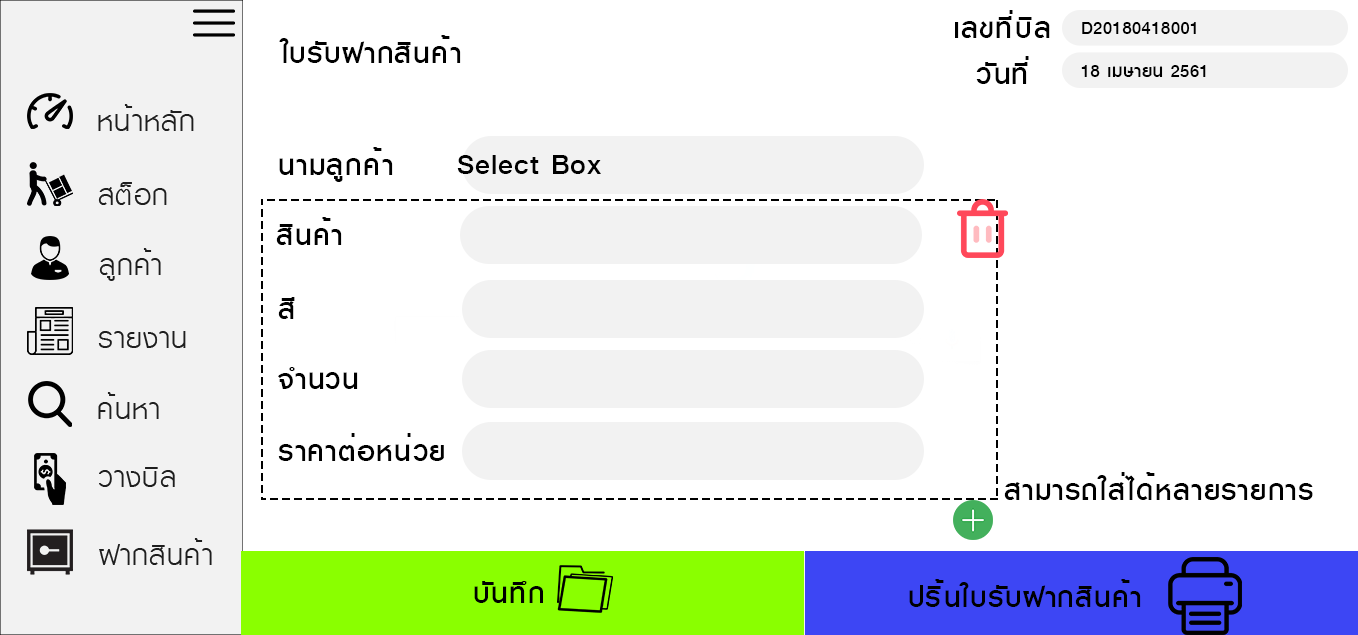
<style>
.page{position:relative;width:1358px;height:635px;background:#ffffff}
.page>*{position:absolute;margin:0}
.t1{font:40px "KittithadaMedium65P";letter-spacing:0.025em;color:#000000}
.t2{font:24.6px "KittithadaMedium65P";letter-spacing:0.025em;color:#000000}
</style>
<div class="page">
<p class="t1" style="left:955px;top:10px;width:95px;height:28px">เลขที่บิล</p>
<p class="t2" style="left:1082px;top:22px;width:114px;height:12px">D20180418001</p>
<p class="t1" style="left:279px;top:35px;width:182px;height:28px">ใบรับฝากสินค้า</p>
<p class="t1" style="left:976px;top:56px;width:53px;height:28px">วันที่</p>
<p class="t2" style="left:1081px;top:65px;width:125px;height:12px">18 เมษายน 2561</p>
<p class="t1" style="left:279px;top:147px;width:114px;height:35px">นามลูกค้า</p>
<p class="t1" style="left:457px;top:155px;width:144px;height:19px">Select Box</p>
<p class="t1" style="left:276px;top:217px;width:66px;height:28px">สินค้า</p>
<p class="t1" style="left:278px;top:297px;width:17px;height:22px">สี</p>
<p class="t1" style="left:278px;top:367px;width:80px;height:22px">จำนวน</p>
<p class="t1" style="left:278px;top:433px;width:166px;height:28px">ราคาต่อหน่วย</p>
<p class="t1" style="left:1004px;top:472px;width:309px;height:28px">สามารถใส่ได้หลายรายการ</p>
<p class="t1" style="left:474px;top:581px;width:69px;height:22px">บันทึก</p>
<p class="t1" style="left:909px;top:579px;width:232px;height:28px">ปริ้นใบรับฝากสินค้า</p>
</div>
